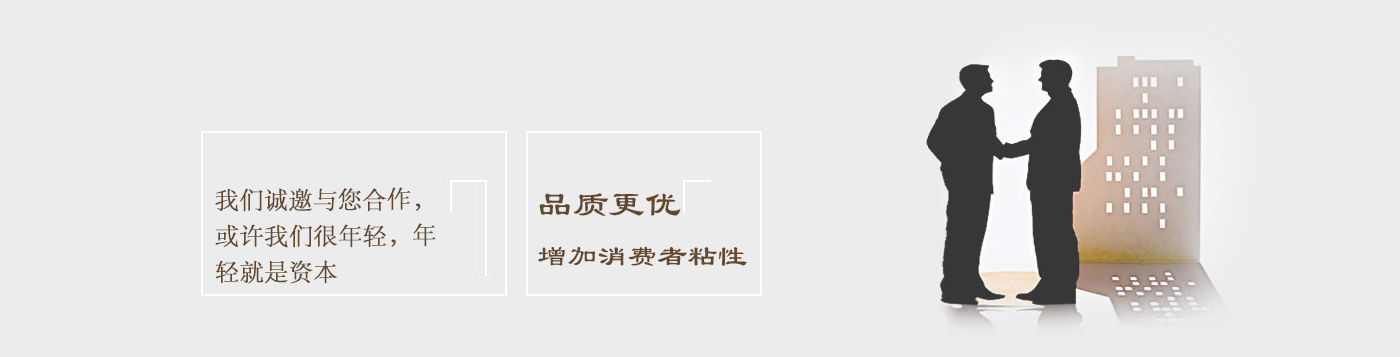
<style>
.page{position:relative;width:1400px;height:357px;background:#ececec}
.page>*{position:absolute;margin:0}
.t1{font:24px/36px "STSong";color:#62482f;font-weight:bold}
.t2{font:36px "LiSu";color:#62482f}
.t3{font:30px "LiSu";color:#62482f}
</style>
<div class="page">
<p class="t1" style="left:215px;top:187px;width:221px;height:97px">我们诚邀与您合作，<br>或许我们很年轻，年轻就是资本</p>
<p class="t2" style="left:539px;top:193px;width:142px;height:23px">品质更优，</p>
<p class="t3" style="left:538px;top:246px;width:209px;height:20px">增加消费者粘性</p>
</div>
